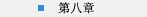
<style>
.page{position:relative;width:147px;height:17px;background:#f1f1f1}
.page>*{position:absolute;margin:0}
.t1{font:12px "SimSun";color:#000000;font-weight:bold}
</style>
<div class="page">
<p class="t1" style="left:38px;top:0px;width:77px;height:17px">第八章</p>
</div>
